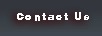
<style>
.page{position:relative;width:102px;height:36px;background:#33363d}
.page>*{position:absolute;margin:0}
.t1{font:10px "HeliosBlack";letter-spacing:0.14em;color:#ffffff}
</style>
<div class="page">
<p class="t1" style="left:17px;top:12px;width:72px;height:9px">Contact Us</p>
</div>
